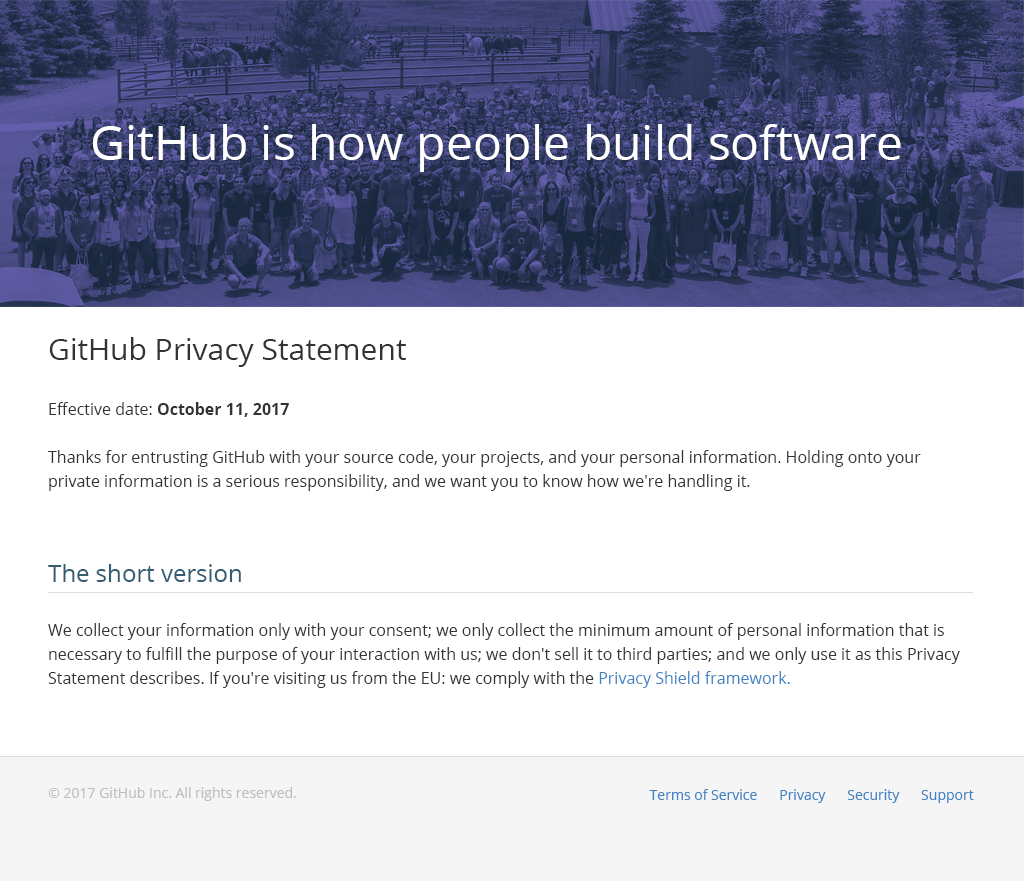
<style>
.page{position:relative;width:1024px;height:881px;background:#ffffff}
.page>*{position:absolute;margin:0}
.t1{font:48px "OpenSans";color:#ffffff}
.t2{font:30px "OpenSans";color:#333333}
.t3{font:16px/24px "OpenSans";color:#333333}
.t4{font:16px/24px "OpenSans-Bold";color:#333333}
.t5{font:24px "OpenSans";color:#325d72}
.t6{font:16px/24px "OpenSans";color:#4183c4}
.t7{font:14px "OpenSans";color:#bebebe}
.t8{font:14px "OpenSans";color:#4183c4}
</style>
<div class="page">
<p class="t1" style="left:92px;top:124px;width:809px;height:48px">GitHub is how people build software</p>
<p class="t2" style="left:49px;top:337px;width:357px;height:30px">GitHub Privacy Statement</p>
<p class="t3" style="left:48px;top:402px;width:873px;height:89px">Effective date: <span class="t4">October 11, 2017<br></span><br>Thanks for entrusting GitHub with your source code, your projects, and your personal information. Holding onto your <br>private information is a serious responsibility, and we want you to know how we're handling it.</p>
<p class="t5" style="left:48px;top:564px;width:193px;height:18px">The short version</p>
<p class="t3" style="left:48px;top:623px;width:912px;height:65px">We collect your information only with your consent; we only collect the minimum amount of personal information that is necessary to fulfill the purpose of your interaction with us; we don't sell it to third parties; and we only use it as this Privacy Statement describes. If you're visiting us from the EU: we comply with the <span class="t6">Privacy Shield framework.</span></p>
<p class="t7" style="left:48px;top:787px;width:248px;height:14px">© 2017 GitHub Inc. All rights reserved.</p>
<p class="t8" style="left:649px;top:789px;width:325px;height:14px">Terms of Service      Privacy      Security      Support</p>
</div>
